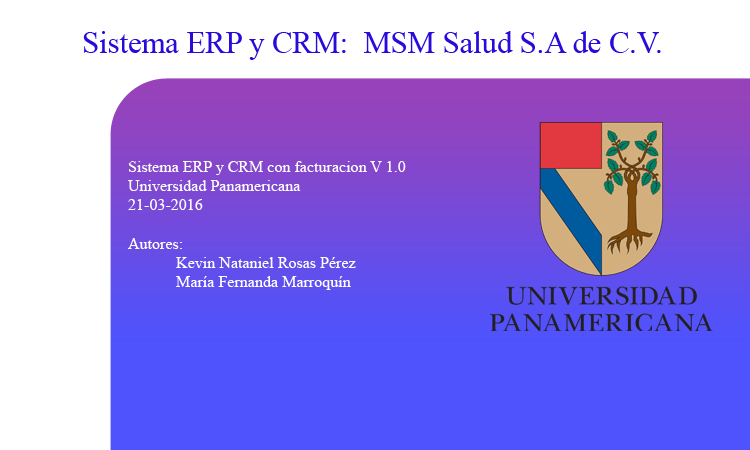
<style>
.page{position:relative;width:750px;height:450px;background:#ffffff}
.page>*{position:absolute;margin:0}
.t1{font:30.6px "TimesNewRomanPSMT";color:#280bdb}
.t2{font:16px "TimesNewRomanPSMT";color:#ffffff}
</style>
<div class="page">
<p class="t1" style="left:83px;top:31px;width:578px;height:29px">Sistema ERP y CRM:  MSM Salud S.A de C.V.</p>
<p class="t2" style="left:128px;top:161px;width:278px;height:129px">Sistema ERP y CRM con facturacion V 1.0<br>Universidad Panamericana<br>21-03-2016 <br><br>Autores: <br> Kevin Nataniel Rosas Pérez<br> María Fernanda Marroquín</p>
</div>
